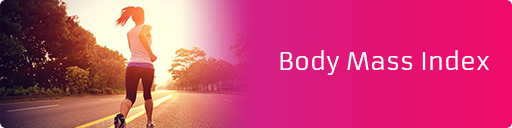
<style>
.page{position:relative;width:512px;height:128px}
.page>*{position:absolute;margin:0}
.t1{font:24px "Armata-Regular";color:#ffffff}
</style>
<div class="page">
<p class="t1" style="left:280px;top:50px;width:209px;height:25px">Body Mass Index</p>
</div>
